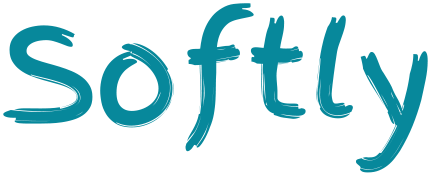
<style>
.page{position:relative;width:432px;height:176px;background:#ffffff}
.page>*{position:absolute;margin:0}
.t1{font:131.2px "FingerPaint-Regular";color:#07889b}
</style>
<div class="page">
<p class="t1" style="left:3px;top:3px;width:425px;height:170px">Softly</p>
</div>
